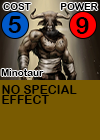
<style>
.page{position:relative;width:100px;height:140px;background:#795b01}
.page>*{position:absolute;margin:0}
.t1{font:9.7px "ArialRoundedMTBold";letter-spacing:0.01em;color:#000000}
.t2{font:24px "ArialRoundedMTBold";letter-spacing:0.01em;color:#000000}
.t3{font:12px/10px "ArialRoundedMTBold";letter-spacing:0.01em;color:#000000}
</style>
<div class="page">
<p class="t1" style="left:3px;top:3px;width:28px;height:7px">COST</p>
<p class="t1" style="left:60px;top:3px;width:38px;height:7px">POWER</p>
<p class="t2" style="left:8px;top:16px;width:13px;height:17px">5</p>
<p class="t2" style="left:76px;top:17px;width:13px;height:17px">9</p>
<p class="t1" style="left:1px;top:69px;width:43px;height:7px">Minotaur</p>
<p class="t3" style="left:2px;top:85px;width:75px;height:19px">NO SPECIAL <br>EFFECT</p>
</div>
